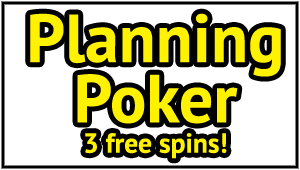
<style>
.page{position:relative;width:300px;height:170px;background:#ffffff}
.page>*{position:absolute;margin:0}
.t1{font:67.9px/60.3px "PTSans-Bold";color:#fff200}
.t2{font:27.5px/30.3px "PTSans-Bold";color:#fff200}
</style>
<div class="page">
<p class="t1" style="left:30px;top:13px;width:251px;height:146px;text-align:center">Planning<br>Poker<br><span class="t2">3 free spins!</span></p>
</div>
